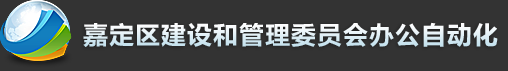
<style>
.page{position:relative;width:508px;height:71px;background:#333333}
.page>*{position:absolute;margin:0}
.t1{font:26px "FZLTCHK--GBK1-0"}
</style>
<div class="page">
<p class="t1" style="left:83px;top:22px;width:415px;height:25px">嘉定区建设和管理委员会办公自动化</p>
</div>
